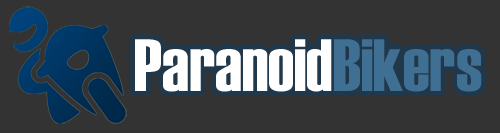
<style>
.page{position:relative;width:500px;height:133px;background:#333333}
.page>*{position:absolute;margin:0}
.t1{font:73.8px "Haettenschweiler";color:#ffffff}
.t2{font:73.8px "Haettenschweiler";color:#406f94}
</style>
<div class="page">
<p class="t1" style="left:135px;top:39px;width:347px;height:53px">Paranoid<span class="t2">Bikers</span></p>
</div>
